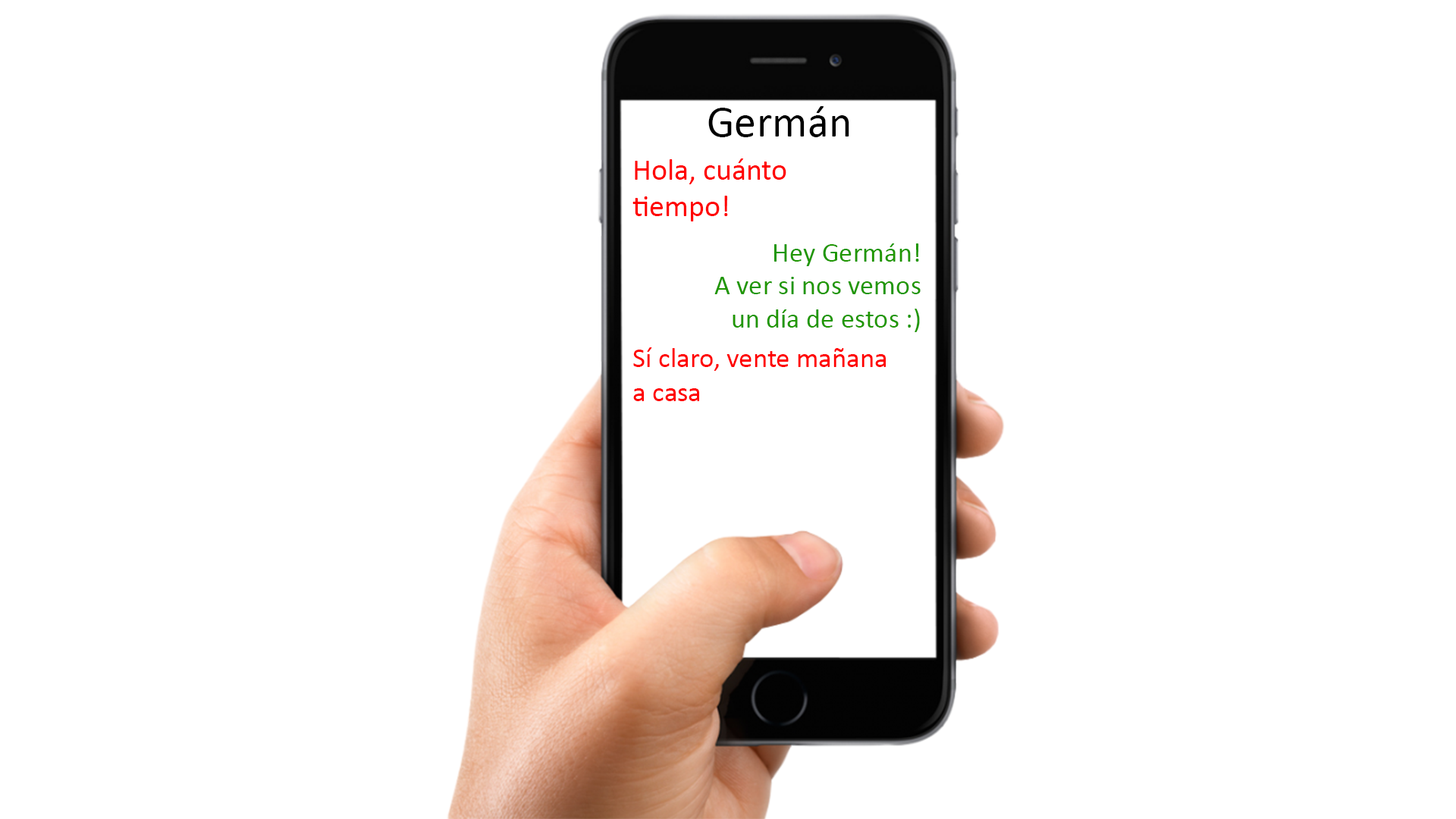
<style>
.page{position:relative;width:1456px;height:819px;background:#ffffff}
.page>*{position:absolute;margin:0}
.t1{font:44.4px "Calibri";color:#000000}
.t2{font:30.1px "Calibri";color:#ff0000}
.t3{font:27.6px "Calibri";color:#209700}
.t4{font:27.9px "Calibri";color:#ff0000}
</style>
<div class="page">
<p class="t1" style="left:708px;top:106px;width:141px;height:31px">Germán</p>
<p class="t2" style="left:632px;top:158px;width:154px;height:63px">Hola, cuánto <br>tiempo!</p>
<p class="t3" style="left:714px;top:243px;width:207px;height:89px;text-align:right">Hey Germán!<br>A ver si nos vemos<br>un día de estos :)</p>
<p class="t4" style="left:633px;top:347px;width:253px;height:54px">Sí claro, vente mañana<br>a casa</p>
</div>
